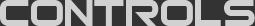
<style>
.page{position:relative;width:255px;height:26px;background:#d1d1d1}
.page>*{position:absolute;margin:0}
.t1{font:50px "Bitsumishi";color:#d1d1d1}
</style>
<div class="page">
<p class="t1" style="left:0px;top:0px;width:255px;height:26px">Controls</p>
</div>
